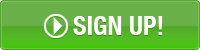
<style>
.page{position:relative;width:200px;height:50px;background:#68b047}
.page>*{position:absolute;margin:0}
.t1{font:26px "HelveticaNeue-CondensedBold";color:#ffffff}
</style>
<div class="page">
<p class="t1" style="left:73px;top:17px;width:90px;height:19px">SIGN UP!</p>
<p class="t1" style="left:73px;top:16px;width:90px;height:19px">SIGN UP!</p>
<p class="t1" style="left:73px;top:17px;width:90px;height:19px">SIGN UP!</p>
<p class="t1" style="left:73px;top:16px;width:90px;height:19px">SIGN UP!</p>
</div>
